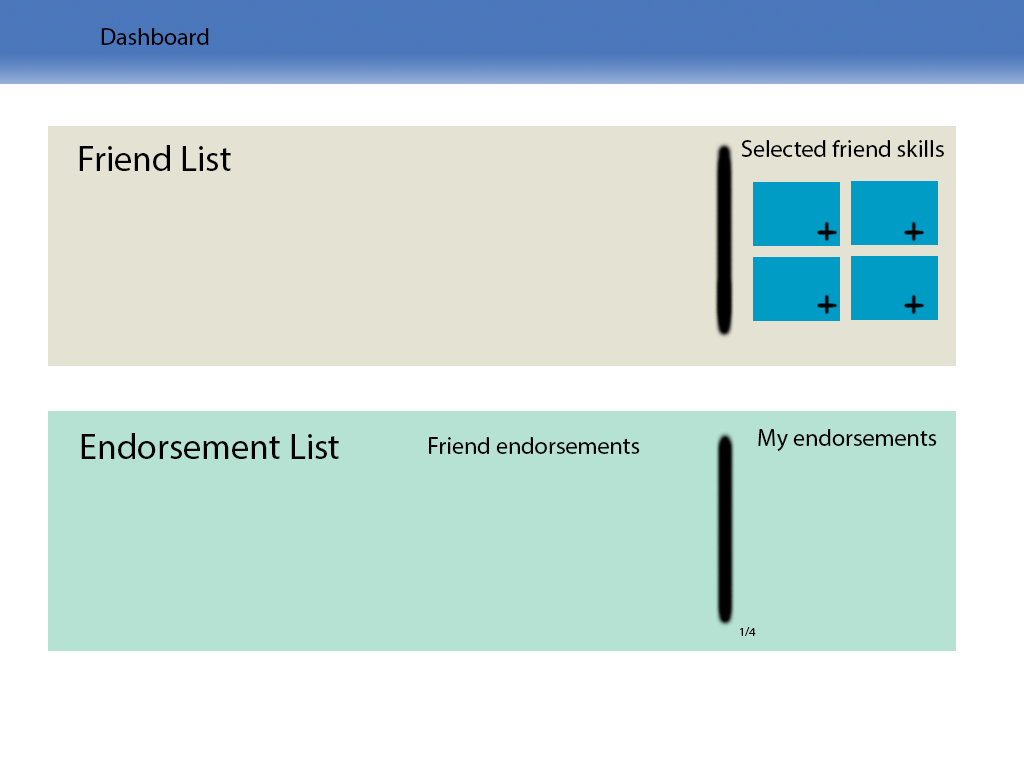
<style>
.page{position:relative;width:1024px;height:768px;background:#ffffff}
.page>*{position:absolute;margin:0}
.t1{font:24px "MyriadPro-Regular";color:#000000}
.t2{font:36px "MyriadPro-Regular";color:#000000}
.t3{font:12px "MyriadPro-Regular";color:#000000}
</style>
<div class="page">
<p class="t1" style="left:101px;top:28px;width:108px;height:17px">Dashboard</p>
<p class="t2" style="left:79px;top:145px;width:152px;height:26px">Friend List</p>
<p class="t1" style="left:741px;top:140px;width:203px;height:17px">Selected friend skills</p>
<p class="t2" style="left:81px;top:433px;width:258px;height:26px">Endorsement List</p>
<p class="t1" style="left:429px;top:437px;width:211px;height:17px">Friend endorsements</p>
<p class="t1" style="left:758px;top:429px;width:179px;height:22px">My endorsements</p>
<p class="t3" style="left:740px;top:627px;width:16px;height:9px">1/4</p>
</div>
